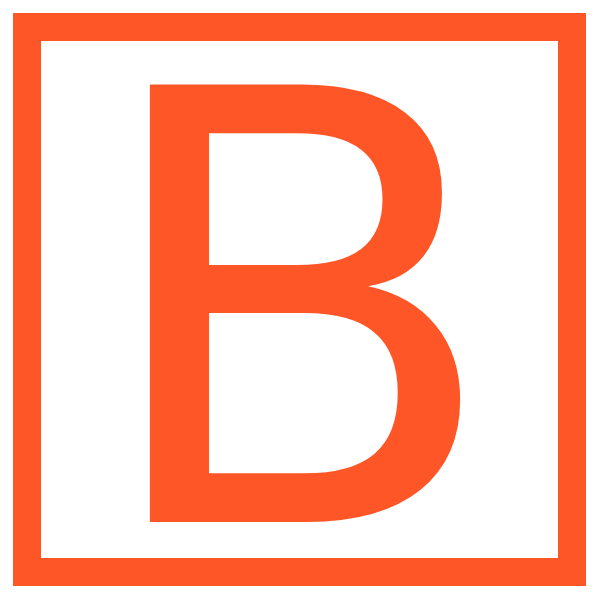
<style>
.page{position:relative;width:600px;height:600px;background:#ffffff}
.page>*{position:absolute;margin:0}
.t1{font:600px "DejaVuSans";color:#ff5627}
</style>
<div class="page">
<p class="t1" style="left:149px;top:84px;width:312px;height:438px">B</p>
</div>
